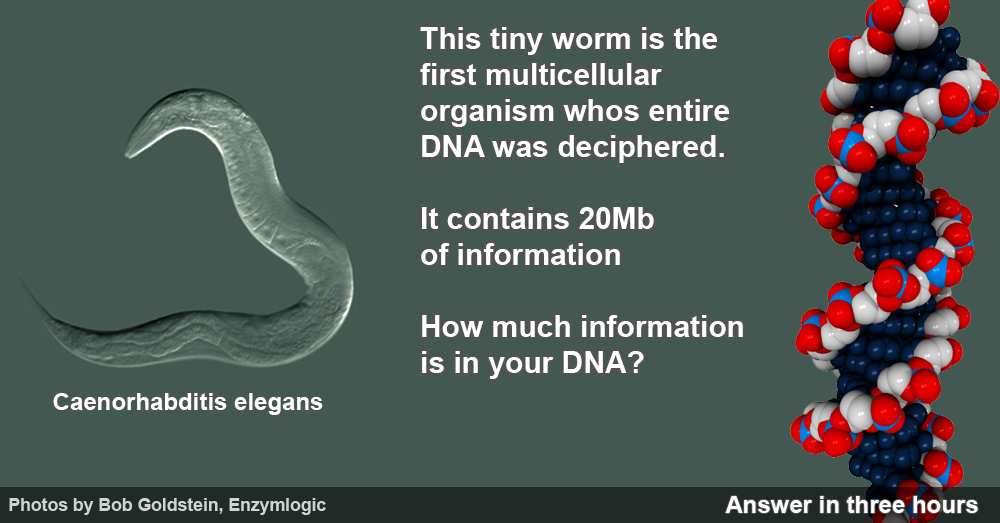
<style>
.page{position:relative;width:1000px;height:523px;background:#445852}
.page>*{position:absolute;margin:0}
.t1{font:30px "Arial-BoldMT";color:#ffffff}
.t2{font:24px "Arial-BoldMT";color:#ffffff}
.t3{font:17.6px "Arial-BoldMT";color:#d2d2d2}
</style>
<div class="page">
<p class="t1" style="left:420px;top:27px;width:323px;height:352px">This tiny worm is the <br>first multicellular <br>organism whos entire <br>DNA was deciphered.<br><br>It contains 20Mb <br>of information<br><br>How much information<br>is in your DNA?</p>
<p class="t2" style="left:53px;top:393px;width:270px;height:22px">Caenorhabditis elegans</p>
<p class="t2" style="left:725px;top:496px;width:253px;height:17px">Answer in three hours</p>
<p class="t3" style="left:9px;top:498px;width:317px;height:17px">Photos by Bob Goldstein, Enzymlogic</p>
</div>
